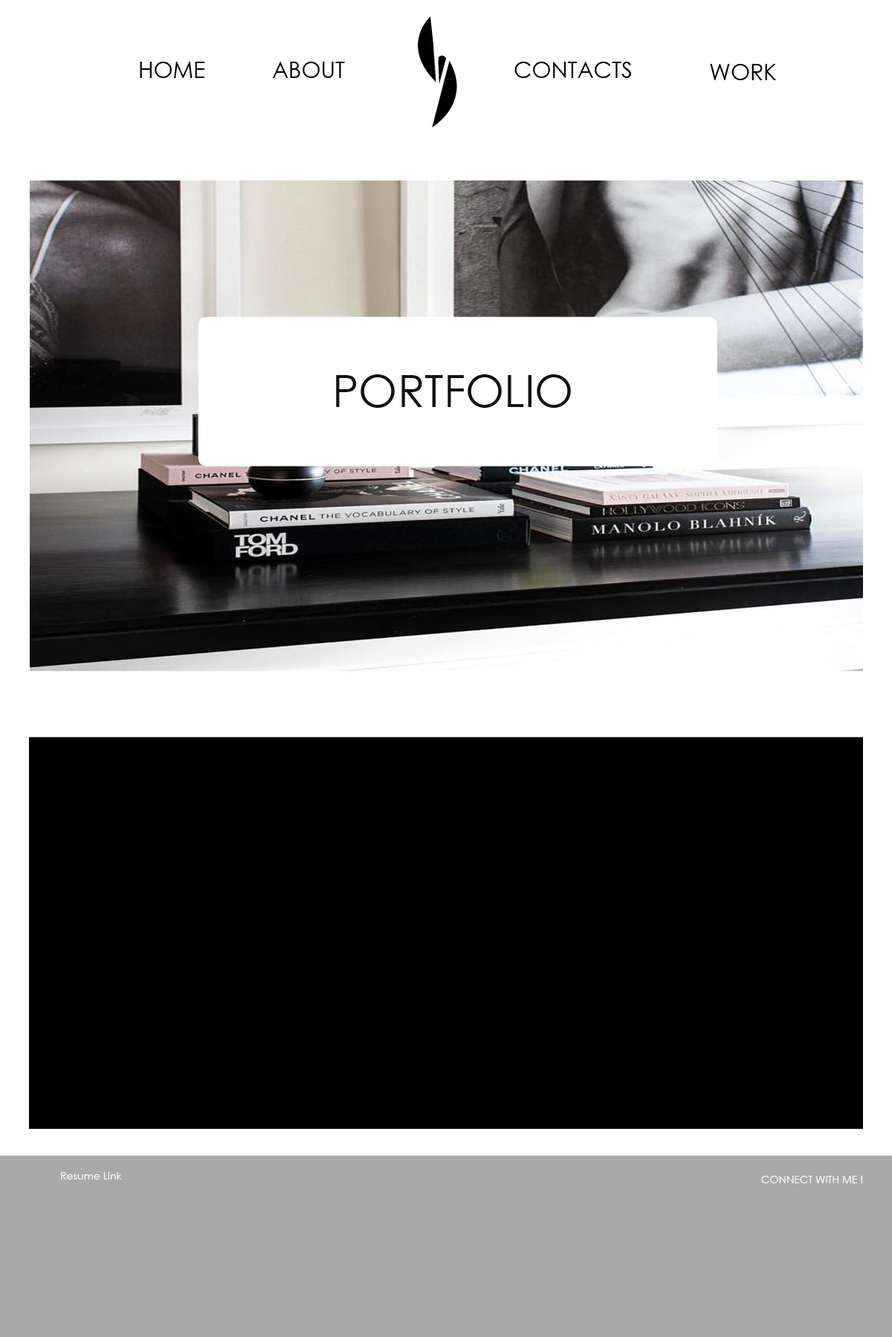
<style>
.page{position:relative;width:892px;height:1337px;background:#ffffff}
.page>*{position:absolute;margin:0}
.t1{font:22.3px "CenturyGothic";color:#000000}
.t2{font:44.6px "CenturyGothic";color:#111111}
.t3{font:10.4px "CenturyGothic";color:#ffffff}
</style>
<div class="page">
<p class="t1" style="left:140px;top:62px;width:65px;height:16px">HOME</p>
<p class="t1" style="left:273px;top:62px;width:72px;height:16px">ABOUT</p>
<p class="t1" style="left:514px;top:62px;width:118px;height:16px">CONTACTS</p>
<p class="t1" style="left:710px;top:64px;width:66px;height:16px">WORK</p>
<p class="t2" style="left:336px;top:374px;width:235px;height:34px">PORTFOLIO</p>
<p class="t3" style="left:61px;top:1172px;width:61px;height:8px">Resume Link</p>
<p class="t3" style="left:761px;top:1176px;width:102px;height:8px">CONNECT WITH ME !</p>
</div>
